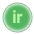
<style>
.page{position:relative;width:34px;height:34px;background:#ffffff}
.page>*{position:absolute;margin:0}
.t1{font:17px "Tahoma-Bold";color:#baf8a4;scale:0.77 1}
</style>
<div class="page">
<p class="t1" style="left:13px;top:10px;width:10px;height:13px">ir</p>
</div>
